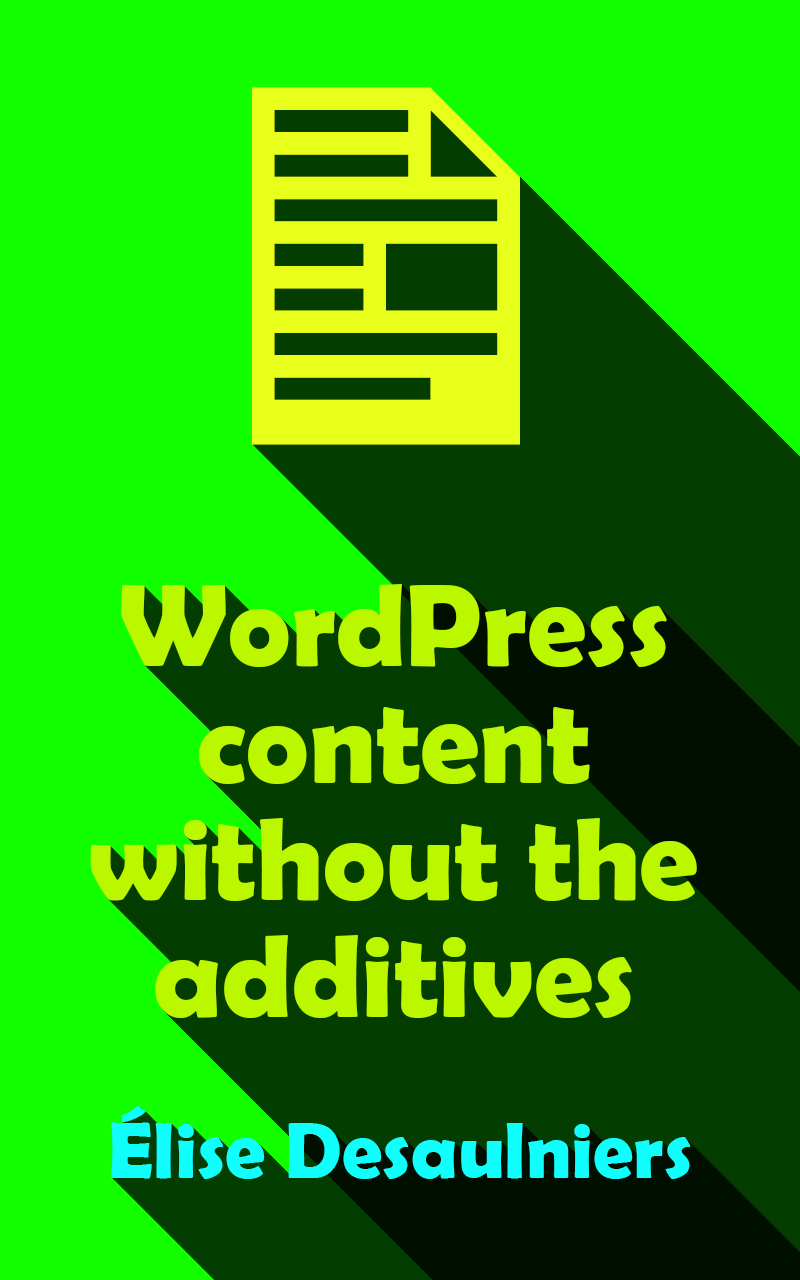
<style>
.page{position:relative;width:800px;height:1280px;background:#12ff00}
.page>*{position:absolute;margin:0}
.t1{font:118px/117px "BerlinSansFBDemi-Bold";color:#bbf800}
.t2{font:80px "BerlinSansFBDemi-Bold";color:#10fffc}
</style>
<div class="page">
<p class="t1" style="left:90px;top:584px;width:607px;height:434px;text-align:center">WordPress content without the additives</p>
<p class="t2" style="left:111px;top:1106px;width:580px;height:73px">Élise Desaulniers</p>
</div>
